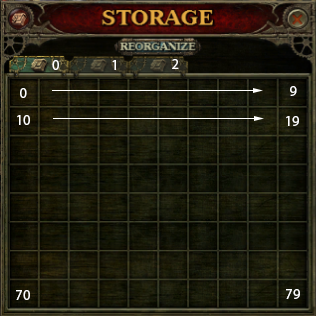
<style>
.page{position:relative;width:316px;height:316px}
.page>*{position:absolute;margin:0}
.t1{font:14px "KozGoPr6N-Regular";color:#ffffff}
</style>
<div class="page">
<p class="t1" style="left:52px;top:60px;width:7px;height:10px">0</p>
<p class="t1" style="left:112px;top:60px;width:4px;height:10px">1</p>
<p class="t1" style="left:172px;top:59px;width:7px;height:10px">2</p>
<p class="t1" style="left:20px;top:88px;width:7px;height:10px">0</p>
<p class="t1" style="left:290px;top:86px;width:7px;height:10px">9</p>
<p class="t1" style="left:17px;top:115px;width:13px;height:10px">10</p>
<p class="t1" style="left:286px;top:116px;width:13px;height:10px">19</p>
<p class="t1" style="left:16px;top:290px;width:14px;height:10px">70</p>
<p class="t1" style="left:286px;top:289px;width:14px;height:10px">79</p>
</div>
